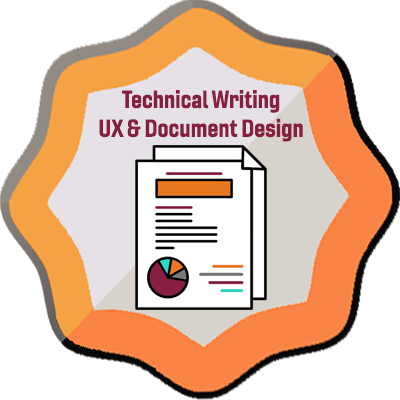
<style>
.page{position:relative;width:400px;height:400px;background:#ffffff}
.page>*{position:absolute;margin:0}
.t1{font:24px "Gineso-ConBol";color:#861f41}
</style>
<div class="page">
<p class="t1" style="left:99px;top:90px;width:204px;height:52px;text-align:center">Technical Writing<br>UX &amp; Document Design</p>
</div>
